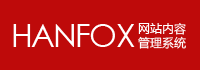
<style>
.page{position:relative;width:200px;height:70px;background:#be0a0a}
.page>*{position:absolute;margin:0}
.t1{font:32px "CenturyGothic";letter-spacing:-0.05em;color:#ffffff}
.t2{font:12px/14px "MicrosoftYaHei";color:#ffffff}
</style>
<div class="page">
<p class="t1" style="left:13px;top:24px;width:122px;height:23px">HANFOX</p>
<p class="t2" style="left:138px;top:23px;width:48px;height:26px">网站内容<br>管理系统</p>
</div>
